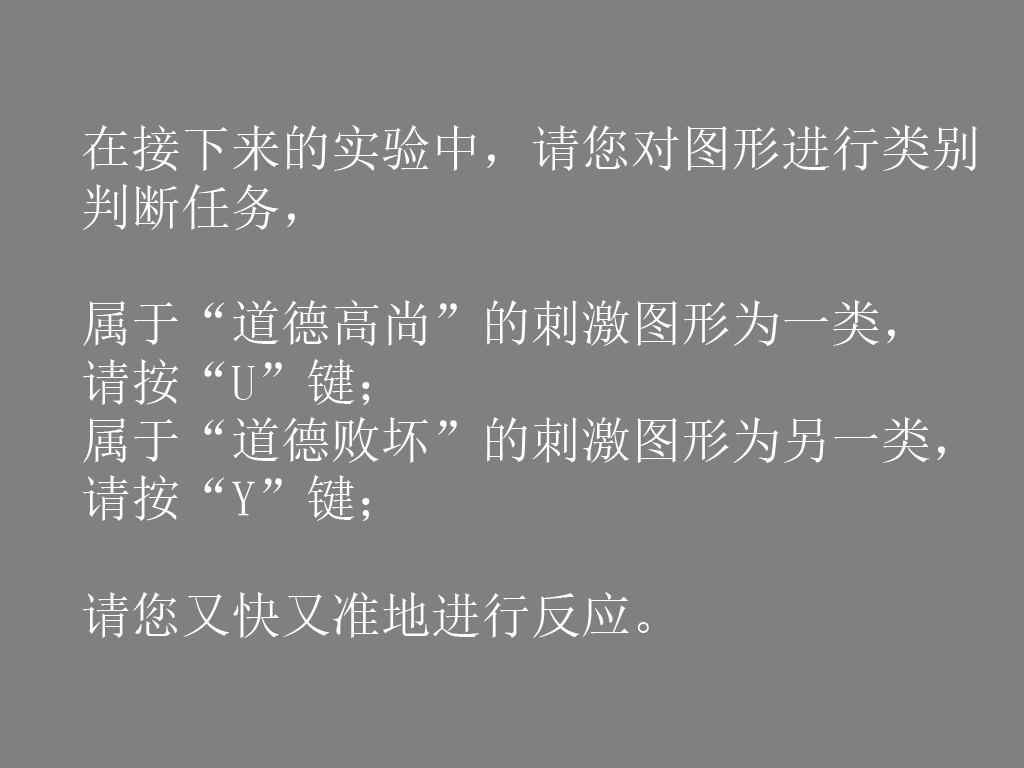
<style>
.page{position:relative;width:1024px;height:768px;background:#808080}
.page>*{position:absolute;margin:0}
.t1{font:50px/58.3px "SimSun";color:#ffffff}
</style>
<div class="page">
<p class="t1" style="left:82px;top:125px;width:895px;height:513px">在接下来的实验中，请您对图形进行类别<br>判断任务，<br><br>属于“道德高尚”的刺激图形为一类，<br>请按“U”键；<br>属于“道德败坏”的刺激图形为另一类，<br>请按“Y”键；<br><br>请您又快又准地进行反应。</p>
</div>
